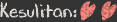
<style>
.page{position:relative;width:117px;height:22px;background:#333333}
.page>*{position:absolute;margin:0}
.t1{font:20px "DJBChalkItUp";color:#d6d2d0}
</style>
<div class="page">
<p class="t1" style="left:0px;top:2px;width:77px;height:16px">Kesulitan:</p>
</div>
